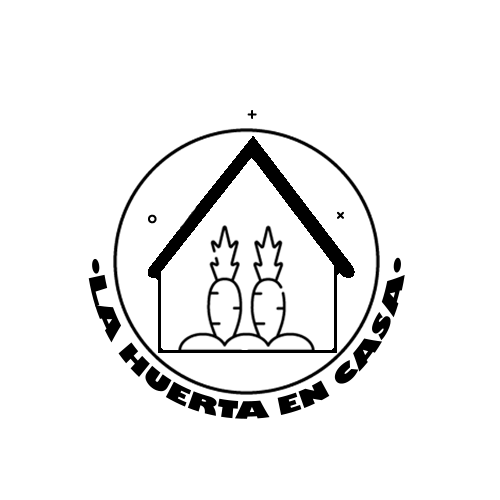
<style>
.page{position:relative;width:500px;height:500px;background:#ffffff}
.page>*{position:absolute;margin:0}
.t1{font:22.7px "GillSans-UltraBold";color:#000000;scale:0.92 1}
</style>
<div class="page">
<p class="t1" style="left:88px;top:257px;width:317px;height:162px">·LA HUERTA EN CASA·</p>
</div>
